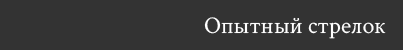
<style>
.page{position:relative;width:403px;height:50px;background:#333333}
.page>*{position:absolute;margin:0}
.t1{font:24px "CrimsonText-Regular";color:#ffffff}
</style>
<div class="page">
<p class="t1" style="left:204px;top:17px;width:182px;height:22px">Опытный стрелок</p>
</div>
